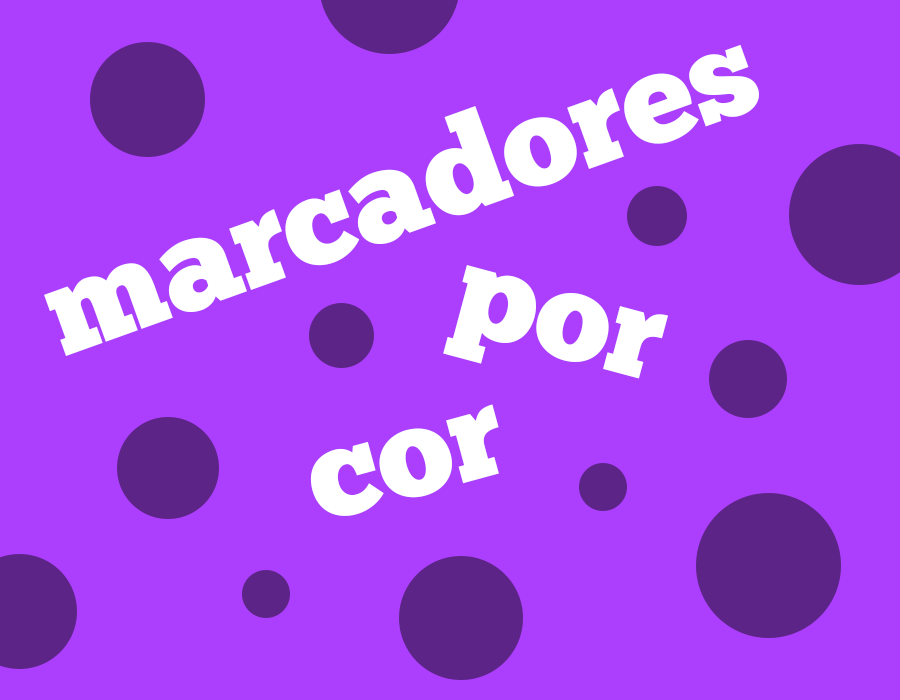
<style>
.page{position:relative;width:900px;height:700px;background:#ac3ffe}
.page>*{position:absolute;margin:0}
.t1{font:129.9px "ChunkFive-Roman";color:#ffffff}
</style>
<div class="page">
<p class="t1" style="left:44px;top:44px;width:715px;height:312px;rotate:-20deg">marcadores</p>
<p class="t1" style="left:443px;top:265px;width:225px;height:114px;rotate:15deg">por</p>
<p class="t1" style="left:310px;top:404px;width:189px;height:112px;rotate:-15deg">cor</p>
</div>
